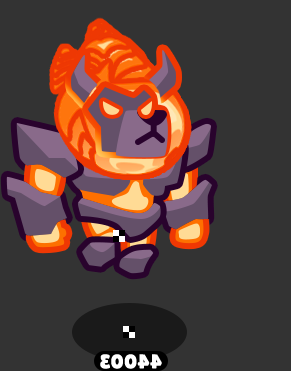
<style>
.page{position:relative;width:291px;height:371px;background:#333333}
.page>*{position:absolute;margin:0}
.t1{font:19.9px "LilitaOne";color:#ffffff;font-weight:bold}
</style>
<div class="page">
<p class="t1" style="left:100px;top:354px;width:62px;height:15px;rotate:180deg">44003</p>
</div>
